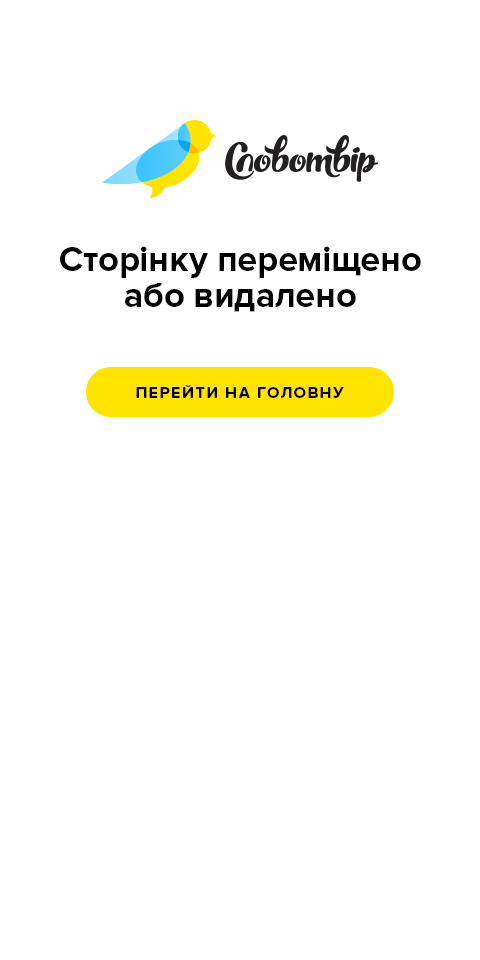
<style>
.page{position:relative;width:480px;height:960px;background:#ffffff}
.page>*{position:absolute;margin:0}
.t1{font:36px/36px "ProximaNova-Bold";color:#000000}
.t2{font:16px "ProximaNova-Bold";letter-spacing:0.1em;color:#000000;text-transform:uppercase}
</style>
<div class="page">
<p class="t1" style="left:60px;top:246px;width:361px;height:66px;text-align:center">Сторінку переміщено<br>або видалено</p>
<p class="t2" style="left:136px;top:385px;width:208px;height:13px">Перейти на головну</p>
</div>
